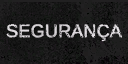
<style>
.page{position:relative;width:128px;height:64px}
.page>*{position:absolute;margin:0}
.t1{font:18.3px "ArialMT";color:#d4d0d4;font-weight:bold;scale:0.96 1}
</style>
<div class="page">
<p class="t1" style="left:6px;top:24px;width:116px;height:18px">SEGURANÇA</p>
</div>
